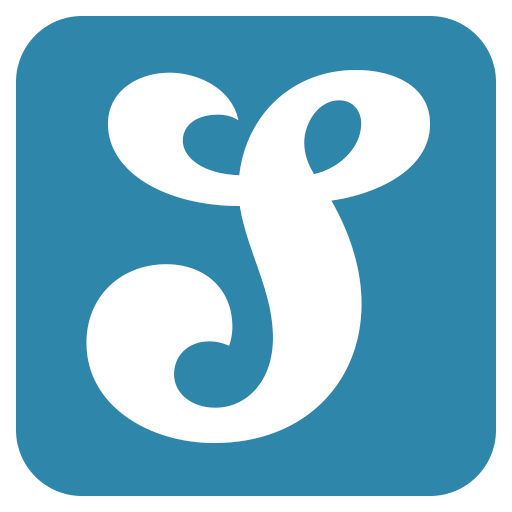
<style>
.page{position:relative;width:512px;height:512px;background:#2e86ab}
.page>*{position:absolute;margin:0}
.t1{font:550px "Casey-Bold";color:#ffffff}
</style>
<div class="page">
<p class="t1" style="left:86px;top:70px;width:344px;height:374px">S</p>
</div>
